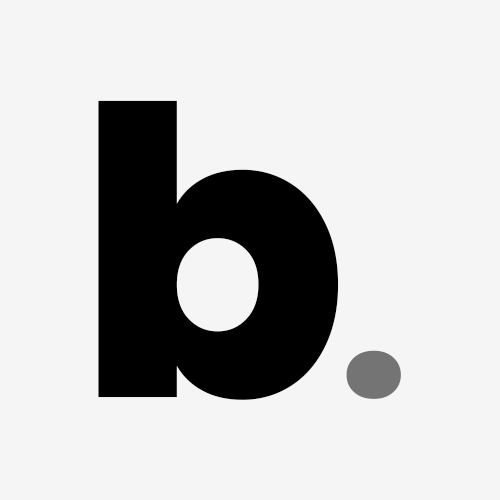
<style>
.page{position:relative;width:500px;height:500px;background:#f5f5f5}
.page>*{position:absolute;margin:0}
.t1{font:400.1px "Poppins-ExtraBold";letter-spacing:0.1em;color:#000000}
.t2{font:237.3px "Poppins-ExtraBold";letter-spacing:0.1em;color:#747474}
</style>
<div class="page">
<p class="t1" style="left:98px;top:100px;width:241px;height:300px">b</p>
<p class="t2" style="left:346px;top:350px;width:55px;height:49px">.</p>
</div>
